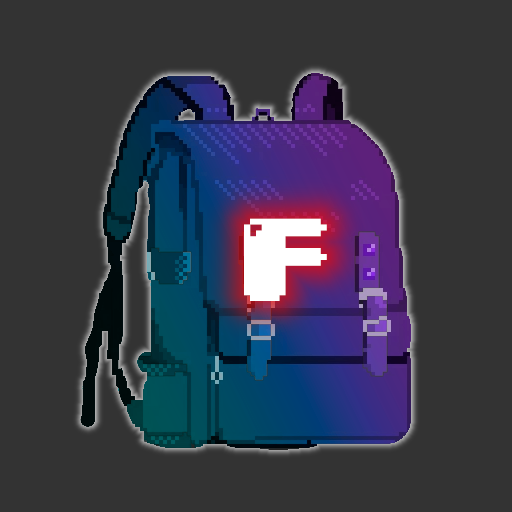
<style>
.page{position:relative;width:512px;height:512px;background:#333333}
.page>*{position:absolute;margin:0}
.t1{font:100px "04bRUSBYLYAJKA-30";color:#ffffff}
</style>
<div class="page">
<p class="t1" style="left:244px;top:218px;width:83px;height:83px">F</p>
</div>
